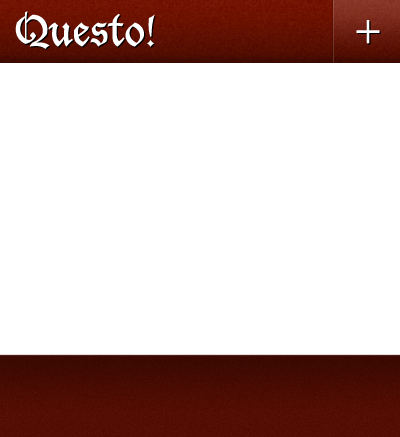
<style>
.page{position:relative;width:400px;height:437px;background:#ffffff}
.page>*{position:absolute;margin:0}
.t1{font:41.9px "LucidaBlackletter";color:#ffffff}
.t2{font:41.9px "LucidaBlackletter";color:#000000}
.t3{font:43.2px "LucidaBlackletter";color:#ffffff}
.t4{font:43.2px "LucidaBlackletter";color:#000000}
</style>
<div class="page">
<p class="t1" style="left:15px;top:11px;width:140px;height:38px">Questo!</p>
<p class="t2" style="left:17px;top:12px;width:139px;height:38px">Questo!</p>
<p class="t3" style="left:356px;top:20px;width:24px;height:24px">+</p>
<p class="t4" style="left:357px;top:21px;width:24px;height:24px">+</p>
</div>
